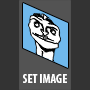
<style>
.page{position:relative;width:90px;height:90px;background:#333333}
.page>*{position:absolute;margin:0}
.t1{font:12.6px "MyriadPro-BoldCond";color:#ffffff}
</style>
<div class="page">
<p class="t1" style="left:23px;top:74px;width:44px;height:9px">SET IMAGE</p>
</div>
